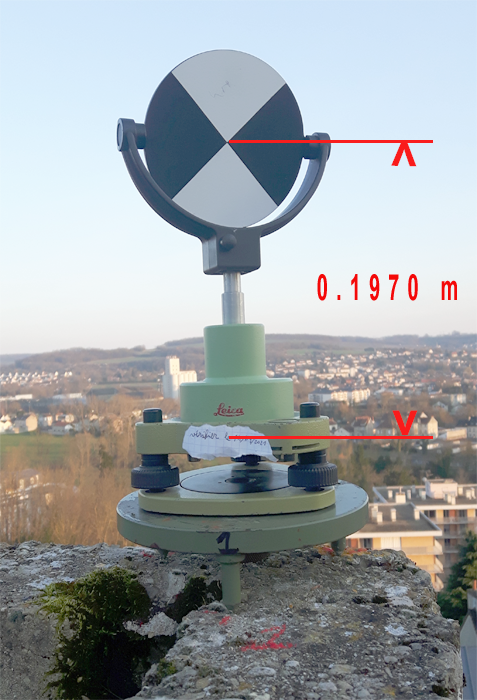
<style>
.page{position:relative;width:477px;height:700px}
.page>*{position:absolute;margin:0}
.t1{font:47.1px "Arial-BoldMT";letter-spacing:0.4em;color:#f40808}
.t2{font:35.9px "Arial-BoldMT";letter-spacing:0.4em;color:#f40808;scale:0.56 1}
</style>
<div class="page">
<p class="t1" style="left:391px;top:141px;width:26px;height:26px;rotate:-179deg">v</p>
<p class="t2" style="left:317px;top:274px;width:140px;height:27px">0.1970 m</p>
<p class="t1" style="left:392px;top:410px;width:26px;height:25px">v</p>
</div>
